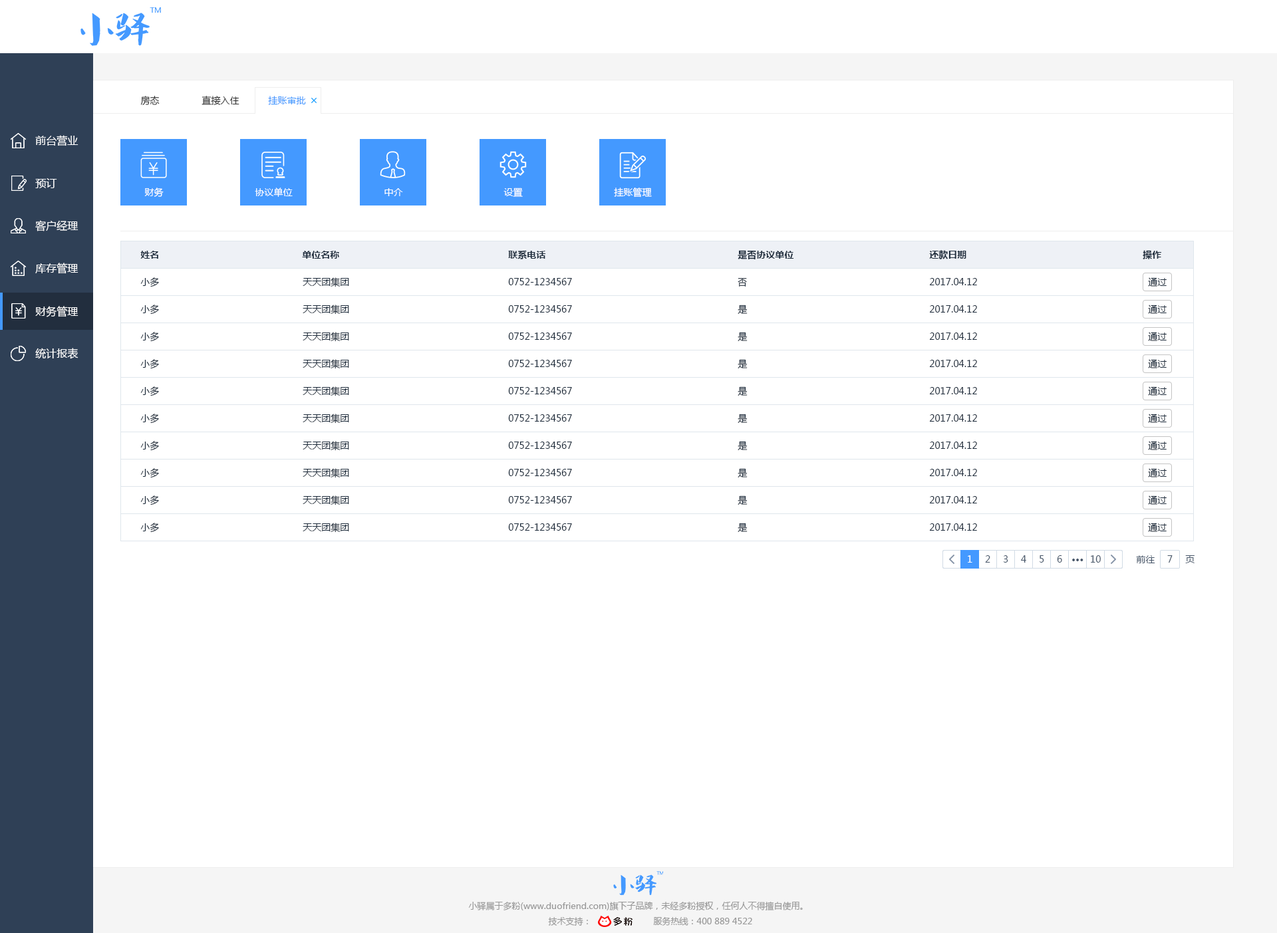
<style>
.page{position:relative;width:1277px;height:933px;background:#ffffff}
.page>*{position:absolute;margin:0}
.t1{font:9.3px "MicrosoftYaHei";color:#333333}
.t2{font:9.3px "MicrosoftYaHei";color:#4499ff}
.t3{font:10.6px "MicrosoftYaHei";color:#ffffff}
.t4{font:9.3px "MicrosoftYaHei";color:#ffffff}
.t5{font:9.3px "MicrosoftYaHei-Bold";color:#1f2d3d}
.t6{font:9.3px "MicrosoftYaHei";color:#1f2d3d}
.t7{font:9.3px "MicrosoftYaHei";color:#48576a}
.t8{font:9.3px "MicrosoftYaHei-Bold";color:#48576a}
.t9{font:8.6px "MicrosoftYaHei";color:#999999}
</style>
<div class="page">
<p class="t1" style="left:140px;top:96px;width:20px;height:9px">房态</p>
<p class="t1" style="left:202px;top:96px;width:38px;height:9px">直接入住</p>
<p class="t2" style="left:268px;top:96px;width:38px;height:9px">挂账审批</p>
<p class="t3" style="left:35px;top:135px;width:44px;height:11px">前台营业</p>
<p class="t3" style="left:35px;top:178px;width:22px;height:10px">预订</p>
<p class="t4" style="left:144px;top:188px;width:20px;height:9px">财务</p>
<p class="t4" style="left:255px;top:188px;width:38px;height:9px">协议单位</p>
<p class="t4" style="left:385px;top:188px;width:18px;height:8px">中介</p>
<p class="t4" style="left:504px;top:188px;width:19px;height:9px">设置</p>
<p class="t4" style="left:614px;top:188px;width:38px;height:10px">挂账管理</p>
<p class="t3" style="left:35px;top:220px;width:44px;height:12px">客户经理</p>
<p class="t5" style="left:140px;top:251px;width:18px;height:8px">姓名</p>
<p class="t5" style="left:302px;top:251px;width:37px;height:8px">单位名称</p>
<p class="t5" style="left:508px;top:250px;width:38px;height:9px">联系电话</p>
<p class="t5" style="left:738px;top:250px;width:56px;height:9px">是否协议单位</p>
<p class="t5" style="left:929px;top:250px;width:38px;height:9px">还款日期</p>
<p class="t5" style="left:1143px;top:250px;width:19px;height:9px">操作</p>
<p class="t3" style="left:35px;top:263px;width:44px;height:11px">库存管理</p>
<p class="t6" style="left:140px;top:277px;width:19px;height:10px">小多</p>
<p class="t6" style="left:303px;top:277px;width:46px;height:10px">天天团集团</p>
<p class="t6" style="left:508px;top:278px;width:64px;height:7px">0752-1234567</p>
<p class="t6" style="left:738px;top:278px;width:9px;height:9px">否</p>
<p class="t6" style="left:929px;top:278px;width:48px;height:7px">2017.04.12</p>
<p class="t6" style="left:1148px;top:277px;width:19px;height:10px">通过</p>
<p class="t6" style="left:140px;top:305px;width:19px;height:10px">小多</p>
<p class="t6" style="left:303px;top:305px;width:46px;height:10px">天天团集团</p>
<p class="t6" style="left:508px;top:305px;width:64px;height:8px">0752-1234567</p>
<p class="t6" style="left:738px;top:305px;width:10px;height:9px">是</p>
<p class="t6" style="left:929px;top:305px;width:48px;height:8px">2017.04.12</p>
<p class="t6" style="left:1148px;top:305px;width:19px;height:9px">通过</p>
<p class="t3" style="left:35px;top:306px;width:44px;height:11px">财务管理</p>
<p class="t6" style="left:140px;top:332px;width:19px;height:10px">小多</p>
<p class="t6" style="left:303px;top:332px;width:46px;height:10px">天天团集团</p>
<p class="t6" style="left:508px;top:333px;width:64px;height:7px">0752-1234567</p>
<p class="t6" style="left:738px;top:332px;width:10px;height:9px">是</p>
<p class="t6" style="left:929px;top:333px;width:48px;height:7px">2017.04.12</p>
<p class="t6" style="left:1148px;top:332px;width:19px;height:9px">通过</p>
<p class="t3" style="left:35px;top:348px;width:44px;height:11px">统计报表</p>
<p class="t6" style="left:140px;top:359px;width:19px;height:10px">小多</p>
<p class="t6" style="left:303px;top:359px;width:46px;height:10px">天天团集团</p>
<p class="t6" style="left:508px;top:360px;width:64px;height:7px">0752-1234567</p>
<p class="t6" style="left:738px;top:359px;width:10px;height:10px">是</p>
<p class="t6" style="left:929px;top:360px;width:48px;height:7px">2017.04.12</p>
<p class="t6" style="left:1148px;top:359px;width:19px;height:10px">通过</p>
<p class="t6" style="left:140px;top:387px;width:19px;height:10px">小多</p>
<p class="t6" style="left:303px;top:387px;width:46px;height:10px">天天团集团</p>
<p class="t6" style="left:508px;top:387px;width:64px;height:8px">0752-1234567</p>
<p class="t6" style="left:738px;top:387px;width:10px;height:9px">是</p>
<p class="t6" style="left:929px;top:387px;width:48px;height:8px">2017.04.12</p>
<p class="t6" style="left:1148px;top:387px;width:19px;height:9px">通过</p>
<p class="t6" style="left:140px;top:414px;width:19px;height:10px">小多</p>
<p class="t6" style="left:303px;top:414px;width:46px;height:10px">天天团集团</p>
<p class="t6" style="left:738px;top:414px;width:10px;height:9px">是</p>
<p class="t6" style="left:1148px;top:414px;width:19px;height:9px">通过</p>
<p class="t6" style="left:508px;top:415px;width:64px;height:7px">0752-1234567</p>
<p class="t6" style="left:929px;top:415px;width:48px;height:7px">2017.04.12</p>
<p class="t6" style="left:140px;top:441px;width:19px;height:10px">小多</p>
<p class="t6" style="left:303px;top:441px;width:46px;height:10px">天天团集团</p>
<p class="t6" style="left:508px;top:442px;width:64px;height:7px">0752-1234567</p>
<p class="t6" style="left:738px;top:441px;width:10px;height:9px">是</p>
<p class="t6" style="left:929px;top:442px;width:48px;height:7px">2017.04.12</p>
<p class="t6" style="left:1148px;top:441px;width:19px;height:9px">通过</p>
<p class="t6" style="left:140px;top:468px;width:19px;height:10px">小多</p>
<p class="t6" style="left:303px;top:468px;width:46px;height:10px">天天团集团</p>
<p class="t6" style="left:508px;top:469px;width:64px;height:7px">0752-1234567</p>
<p class="t6" style="left:738px;top:468px;width:10px;height:10px">是</p>
<p class="t6" style="left:929px;top:469px;width:48px;height:7px">2017.04.12</p>
<p class="t6" style="left:1148px;top:468px;width:19px;height:10px">通过</p>
<p class="t6" style="left:140px;top:496px;width:19px;height:10px">小多</p>
<p class="t6" style="left:303px;top:496px;width:46px;height:10px">天天团集团</p>
<p class="t6" style="left:508px;top:496px;width:64px;height:8px">0752-1234567</p>
<p class="t6" style="left:738px;top:496px;width:10px;height:9px">是</p>
<p class="t6" style="left:929px;top:496px;width:48px;height:8px">2017.04.12</p>
<p class="t6" style="left:1148px;top:496px;width:19px;height:9px">通过</p>
<p class="t6" style="left:140px;top:523px;width:19px;height:10px">小多</p>
<p class="t6" style="left:303px;top:523px;width:46px;height:10px">天天团集团</p>
<p class="t6" style="left:508px;top:524px;width:64px;height:7px">0752-1234567</p>
<p class="t6" style="left:738px;top:523px;width:10px;height:9px">是</p>
<p class="t6" style="left:929px;top:524px;width:48px;height:7px">2017.04.12</p>
<p class="t6" style="left:1148px;top:523px;width:19px;height:9px">通过</p>
<p class="t4" style="left:968px;top:556px;width:5px;height:7px">1</p>
<p class="t7" style="left:985px;top:556px;width:6px;height:7px">2</p>
<p class="t7" style="left:1003px;top:556px;width:6px;height:7px">3</p>
<p class="t7" style="left:1021px;top:556px;width:6px;height:7px">4</p>
<p class="t7" style="left:1040px;top:556px;width:5px;height:7px">5</p>
<p class="t7" style="left:1057px;top:556px;width:6px;height:7px">6</p>
<p class="t7" style="left:1091px;top:556px;width:10px;height:7px">10</p>
<p class="t7" style="left:1136px;top:556px;width:20px;height:8px">前往</p>
<p class="t7" style="left:1168px;top:556px;width:5px;height:7px">7</p>
<p class="t7" style="left:1186px;top:556px;width:9px;height:8px">页</p>
<p class="t8" style="left:1073px;top:559px;width:11px;height:3px">···</p>
<p class="t9" style="left:468px;top:902px;width:335px;height:9px">小驿属于多粉(www.duofriend.com)旗下子品牌，未经多粉授权，任何人不得擅自使用。</p>
<p class="t9" style="left:548px;top:917px;width:40px;height:9px">技术支持：</p>
<p class="t9" style="left:653px;top:917px;width:99px;height:9px">服务热线：400 889 4522</p>
</div>
